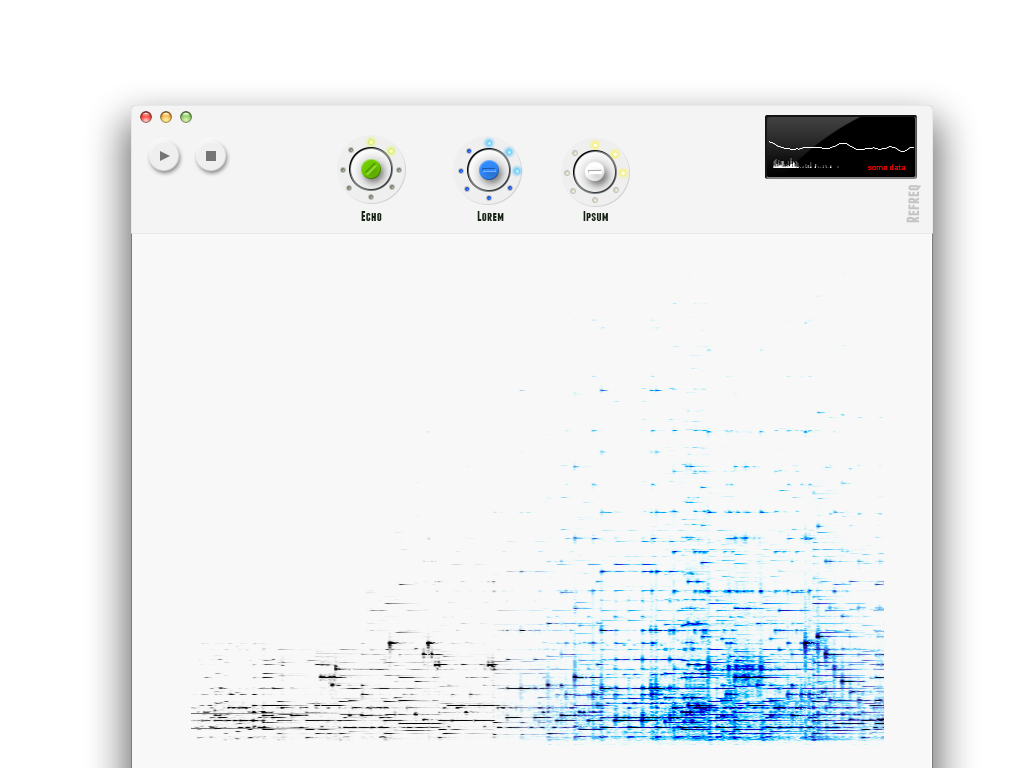
<style>
.page{position:relative;width:1024px;height:768px;background:#f9f8f8}
.page>*{position:absolute;margin:0}
.t1{font:8px "DinHMediumMedium";letter-spacing:0.01em;color:#ff0000}
.t2{font:17.6px "Franchise-Bold";letter-spacing:0.01em;color:#c4c4c4}
.t3{font:13.7px "Franchise-Bold";letter-spacing:0.01em;color:#152313;scale:1.04 1}
</style>
<div class="page">
<p class="t1" style="left:868px;top:164px;width:37px;height:6px">some data</p>
<p class="t2" style="left:906px;top:185px;width:15px;height:38px;rotate:-90deg">Refreq</p>
<p class="t3" style="left:361px;top:211px;width:21px;height:10px">Echo</p>
<p class="t3" style="left:477px;top:211px;width:27px;height:10px">Lorem</p>
<p class="t3" style="left:583px;top:211px;width:25px;height:10px">Ipsum</p>
</div>
